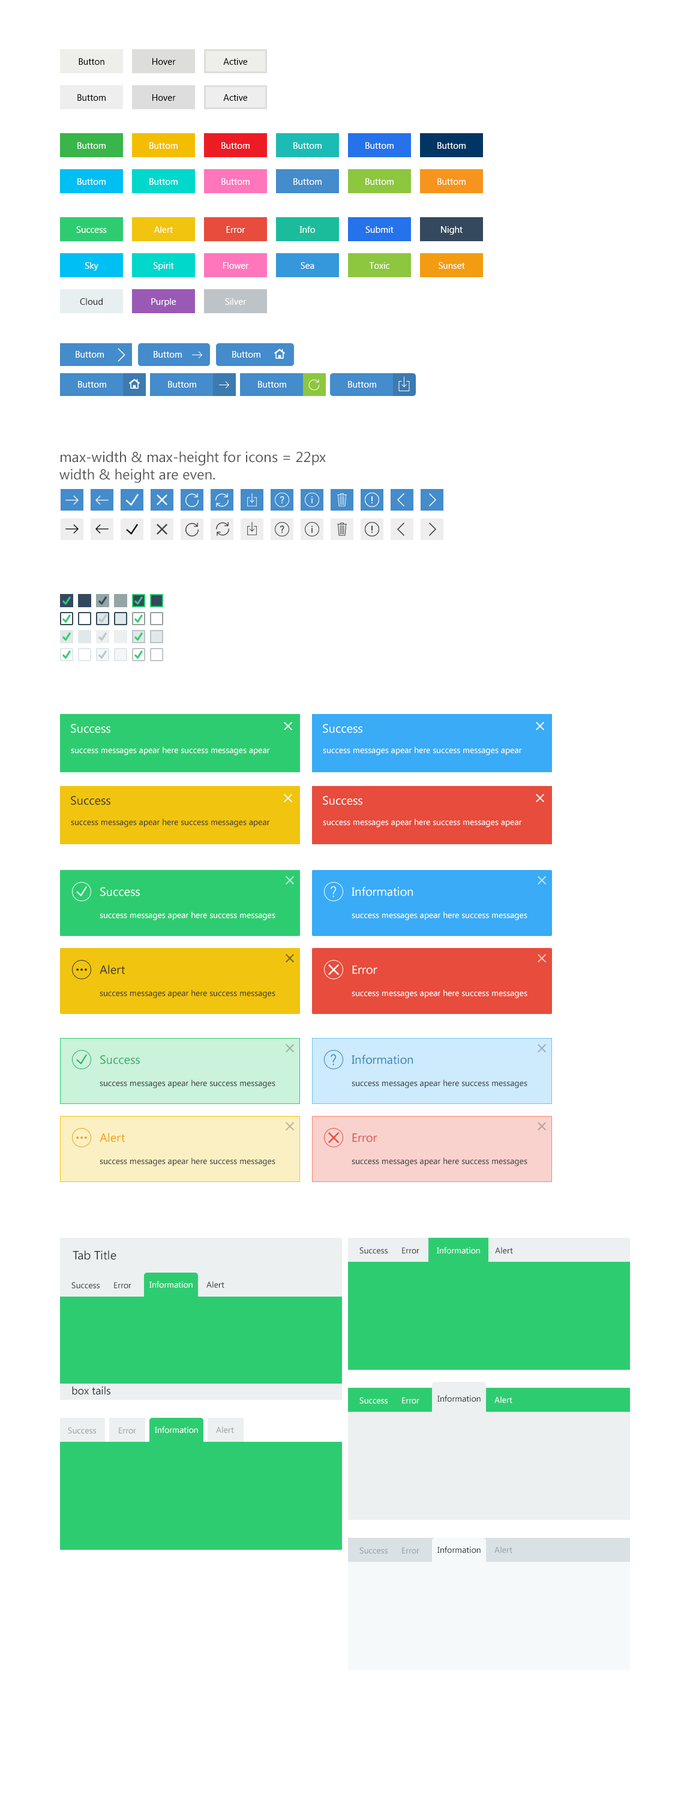
<style>
.page{position:relative;width:696px;height:1800px;background:#ffffff}
.page>*{position:absolute;margin:0}
.t1{font:9px "LaoUI";color:#000000}
.t2{font:9px "LaoUI";color:#ffffff}
.t3{font:9px "LaoUI";color:#333333}
.t4{font:14.4px "SegoeUI";color:#555555}
.t5{font:12px "SegoeUI";color:#ffffff}
.t6{font:8.4px "SegoeUI";color:#ffffff}
.t7{font:12px "SegoeUI";color:#333333}
.t8{font:8.4px "SegoeUI";color:#333333}
.t9{font:12px "SegoeUI";color:#27ae60}
.t10{font:12px "SegoeUI";color:#2980b9}
.t11{font:12px "SegoeUI";color:#f39c12}
.t12{font:12px "SegoeUI";color:#e74c3c}
.t13{font:10.8px "SegoeUI";color:#333333}
.t14{font:8.4px "SegoeUI";color:#959fa0}
</style>
<div class="page">
<p class="t1" style="left:79px;top:58px;width:25px;height:7px">Button</p>
<p class="t1" style="left:152px;top:58px;width:24px;height:7px">Hover</p>
<p class="t1" style="left:223px;top:58px;width:25px;height:7px">Active</p>
<p class="t1" style="left:77px;top:94px;width:29px;height:7px">Buttom</p>
<p class="t1" style="left:152px;top:94px;width:24px;height:7px">Hover</p>
<p class="t1" style="left:223px;top:94px;width:25px;height:7px">Active</p>
<p class="t2" style="left:77px;top:142px;width:29px;height:7px">Buttom</p>
<p class="t2" style="left:149px;top:142px;width:29px;height:7px">Buttom</p>
<p class="t2" style="left:221px;top:142px;width:29px;height:7px">Buttom</p>
<p class="t2" style="left:293px;top:142px;width:29px;height:7px">Buttom</p>
<p class="t2" style="left:365px;top:142px;width:29px;height:7px">Buttom</p>
<p class="t2" style="left:437px;top:142px;width:29px;height:7px">Buttom</p>
<p class="t2" style="left:77px;top:178px;width:29px;height:7px">Buttom</p>
<p class="t2" style="left:149px;top:178px;width:29px;height:7px">Buttom</p>
<p class="t2" style="left:221px;top:178px;width:29px;height:7px">Buttom</p>
<p class="t2" style="left:293px;top:178px;width:29px;height:7px">Buttom</p>
<p class="t2" style="left:365px;top:178px;width:29px;height:7px">Buttom</p>
<p class="t2" style="left:437px;top:178px;width:29px;height:7px">Buttom</p>
<p class="t2" style="left:76px;top:226px;width:31px;height:7px">Success</p>
<p class="t2" style="left:154px;top:226px;width:19px;height:7px">Alert</p>
<p class="t2" style="left:226px;top:226px;width:19px;height:7px">Error</p>
<p class="t2" style="left:299px;top:226px;width:16px;height:7px">Info</p>
<p class="t2" style="left:365px;top:226px;width:29px;height:7px">Submit</p>
<p class="t2" style="left:441px;top:226px;width:22px;height:9px">Night</p>
<p class="t2" style="left:85px;top:262px;width:13px;height:9px">Sky</p>
<p class="t2" style="left:154px;top:262px;width:20px;height:9px">Spirit</p>
<p class="t2" style="left:223px;top:262px;width:26px;height:7px">Flower</p>
<p class="t2" style="left:301px;top:262px;width:13px;height:7px">Sea</p>
<p class="t2" style="left:369px;top:262px;width:20px;height:7px">Toxic</p>
<p class="t2" style="left:439px;top:262px;width:26px;height:7px">Sunset</p>
<p class="t3" style="left:80px;top:298px;width:23px;height:7px">Cloud</p>
<p class="t2" style="left:151px;top:298px;width:25px;height:9px">Purple</p>
<p class="t2" style="left:225px;top:298px;width:22px;height:7px">Silver</p>
<p class="t2" style="left:76px;top:351px;width:28px;height:7px">Buttom</p>
<p class="t2" style="left:154px;top:351px;width:28px;height:7px">Buttom</p>
<p class="t2" style="left:232px;top:351px;width:28px;height:7px">Buttom</p>
<p class="t2" style="left:78px;top:381px;width:28px;height:7px">Buttom</p>
<p class="t2" style="left:168px;top:381px;width:28px;height:7px">Buttom</p>
<p class="t2" style="left:258px;top:381px;width:28px;height:7px">Buttom</p>
<p class="t2" style="left:348px;top:381px;width:28px;height:7px">Buttom</p>
<p class="t4" style="left:59px;top:451px;width:267px;height:32px;text-align:right">max-width &amp; max-height for icons = 22px<br>width &amp; height are even.</p>
<p class="t5" style="left:71px;top:724px;width:39px;height:9px">Success</p>
<p class="t5" style="left:323px;top:724px;width:39px;height:9px">Success</p>
<p class="t6" style="left:71px;top:746px;width:199px;height:9px">success messages apear here success messages apear</p>
<p class="t6" style="left:323px;top:746px;width:199px;height:9px">success messages apear here success messages apear</p>
<p class="t7" style="left:71px;top:796px;width:39px;height:9px">Success</p>
<p class="t5" style="left:323px;top:796px;width:39px;height:9px">Success</p>
<p class="t8" style="left:71px;top:818px;width:199px;height:9px">success messages apear here success messages apear</p>
<p class="t6" style="left:323px;top:818px;width:199px;height:9px">success messages apear here success messages apear</p>
<p class="t5" style="left:100px;top:887px;width:40px;height:9px">Success</p>
<p class="t5" style="left:352px;top:887px;width:61px;height:9px">Information</p>
<p class="t6" style="left:100px;top:911px;width:175px;height:9px">success messages apear here success messages</p>
<p class="t6" style="left:352px;top:911px;width:175px;height:9px">success messages apear here success messages</p>
<p class="t7" style="left:100px;top:965px;width:25px;height:9px">Alert</p>
<p class="t5" style="left:352px;top:965px;width:25px;height:9px">Error</p>
<p class="t8" style="left:100px;top:989px;width:175px;height:9px">success messages apear here success messages</p>
<p class="t6" style="left:352px;top:989px;width:175px;height:9px">success messages apear here success messages</p>
<p class="t9" style="left:100px;top:1055px;width:40px;height:9px">Success</p>
<p class="t10" style="left:352px;top:1055px;width:61px;height:9px">Information</p>
<p class="t8" style="left:100px;top:1079px;width:175px;height:9px">success messages apear here success messages</p>
<p class="t8" style="left:352px;top:1079px;width:175px;height:9px">success messages apear here success messages</p>
<p class="t11" style="left:100px;top:1133px;width:25px;height:9px">Alert</p>
<p class="t12" style="left:352px;top:1133px;width:25px;height:9px">Error</p>
<p class="t8" style="left:100px;top:1157px;width:175px;height:9px">success messages apear here success messages</p>
<p class="t8" style="left:352px;top:1157px;width:175px;height:9px">success messages apear here success messages</p>
<p class="t7" style="left:73px;top:1250px;width:43px;height:10px">Tab Title</p>
<p class="t8" style="left:359px;top:1247px;width:29px;height:7px">Success</p>
<p class="t8" style="left:402px;top:1247px;width:17px;height:7px">Error</p>
<p class="t6" style="left:437px;top:1247px;width:43px;height:7px">Information</p>
<p class="t8" style="left:495px;top:1247px;width:18px;height:7px">Alert</p>
<p class="t8" style="left:71px;top:1282px;width:29px;height:7px">Success</p>
<p class="t8" style="left:114px;top:1282px;width:17px;height:7px">Error</p>
<p class="t6" style="left:149px;top:1281px;width:44px;height:7px">Information</p>
<p class="t8" style="left:206px;top:1281px;width:18px;height:7px">Alert</p>
<p class="t13" style="left:72px;top:1386px;width:38px;height:9px">box tails</p>
<p class="t6" style="left:359px;top:1397px;width:29px;height:7px">Success</p>
<p class="t6" style="left:402px;top:1397px;width:17px;height:7px">Error</p>
<p class="t8" style="left:437px;top:1395px;width:44px;height:7px">Information</p>
<p class="t6" style="left:494px;top:1396px;width:18px;height:7px">Alert</p>
<p class="t14" style="left:68px;top:1427px;width:28px;height:7px">Success</p>
<p class="t14" style="left:119px;top:1427px;width:17px;height:7px">Error</p>
<p class="t6" style="left:155px;top:1426px;width:43px;height:7px">Information</p>
<p class="t14" style="left:216px;top:1426px;width:18px;height:7px">Alert</p>
<p class="t14" style="left:359px;top:1547px;width:29px;height:7px">Success</p>
<p class="t14" style="left:402px;top:1547px;width:17px;height:7px">Error</p>
<p class="t8" style="left:437px;top:1546px;width:44px;height:7px">Information</p>
<p class="t14" style="left:494px;top:1546px;width:18px;height:7px">Alert</p>
</div>
